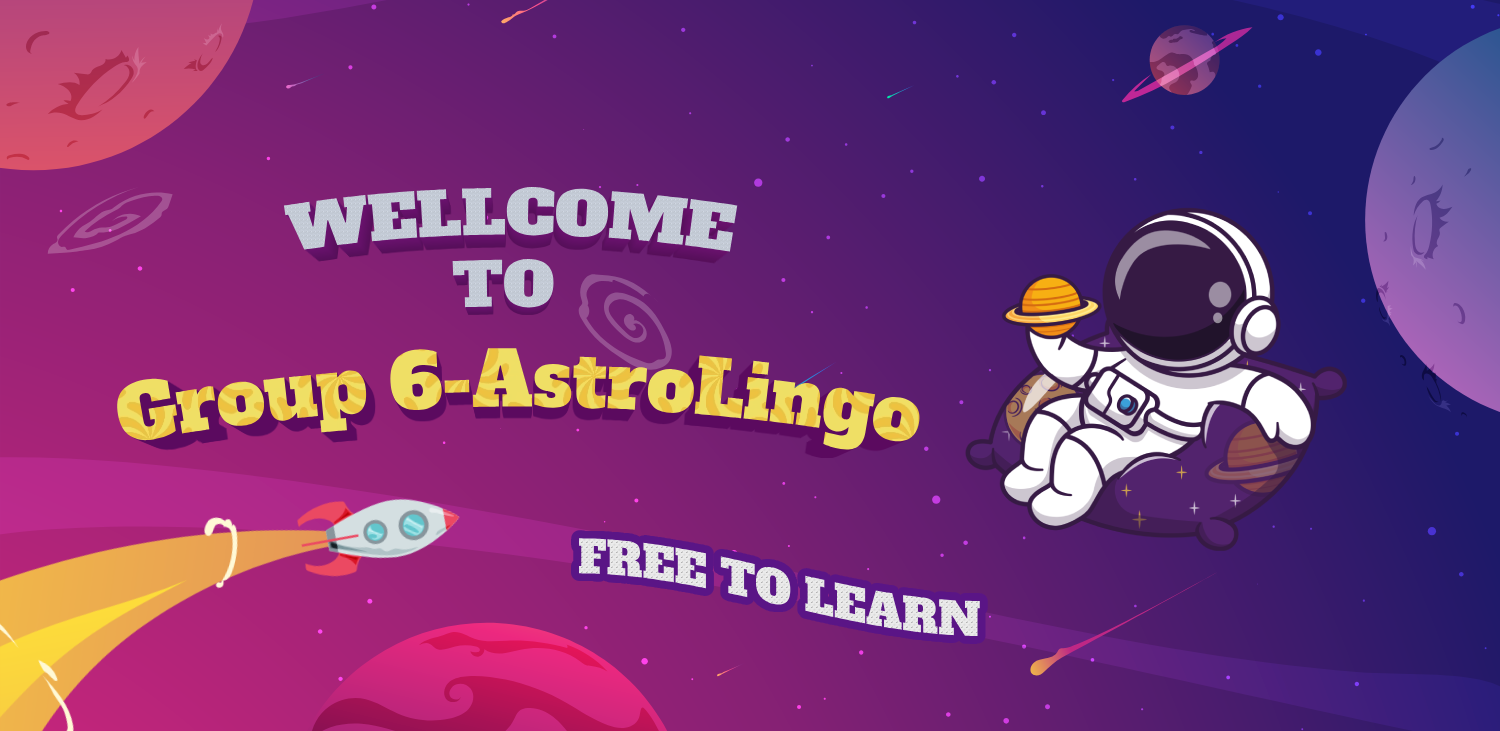
<style>
.page{position:relative;width:1500px;height:731px}
.page>*{position:absolute;margin:0}
.t1{font:60px "AlfaSlabOne-Regular";color:#c3cad5}
.t2{font:75px "AlfaSlabOne-Regular"}
.t3{font:45px "AlfaSlabOne-Regular";color:#e9e9e9}
</style>
<div class="page">
<p class="t1" style="left:283px;top:186px;width:455px;height:122px">WELLCOME<br>       TO</p>
<p class="t2" style="left:117px;top:348px;width:803px;height:102px">Group 6-AstroLingo</p>
<p class="t3" style="left:579px;top:538px;width:401px;height:98px">FREE TO LEARN</p>
</div>
